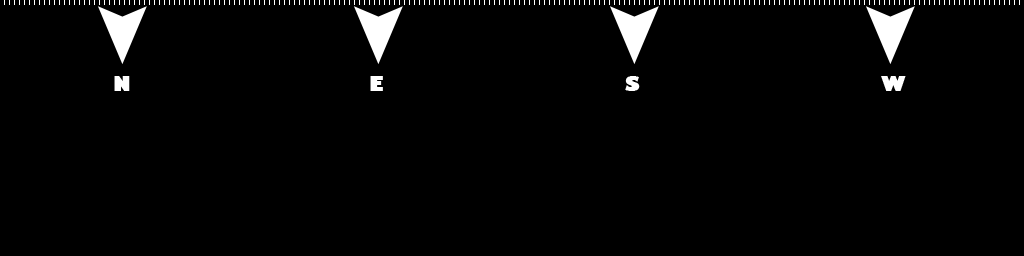
<style>
.page{position:relative;width:1024px;height:256px;background:#000000}
.page>*{position:absolute;margin:0}
.t1{font:20px "GillSans-UltraBold";color:#ffffff}
</style>
<div class="page">
<p class="t1" style="left:114px;top:76px;width:16px;height:15px">N</p>
<p class="t1" style="left:370px;top:76px;width:13px;height:15px">E</p>
<p class="t1" style="left:625px;top:76px;width:15px;height:15px">S</p>
<p class="t1" style="left:881px;top:76px;width:25px;height:15px">W</p>
</div>
